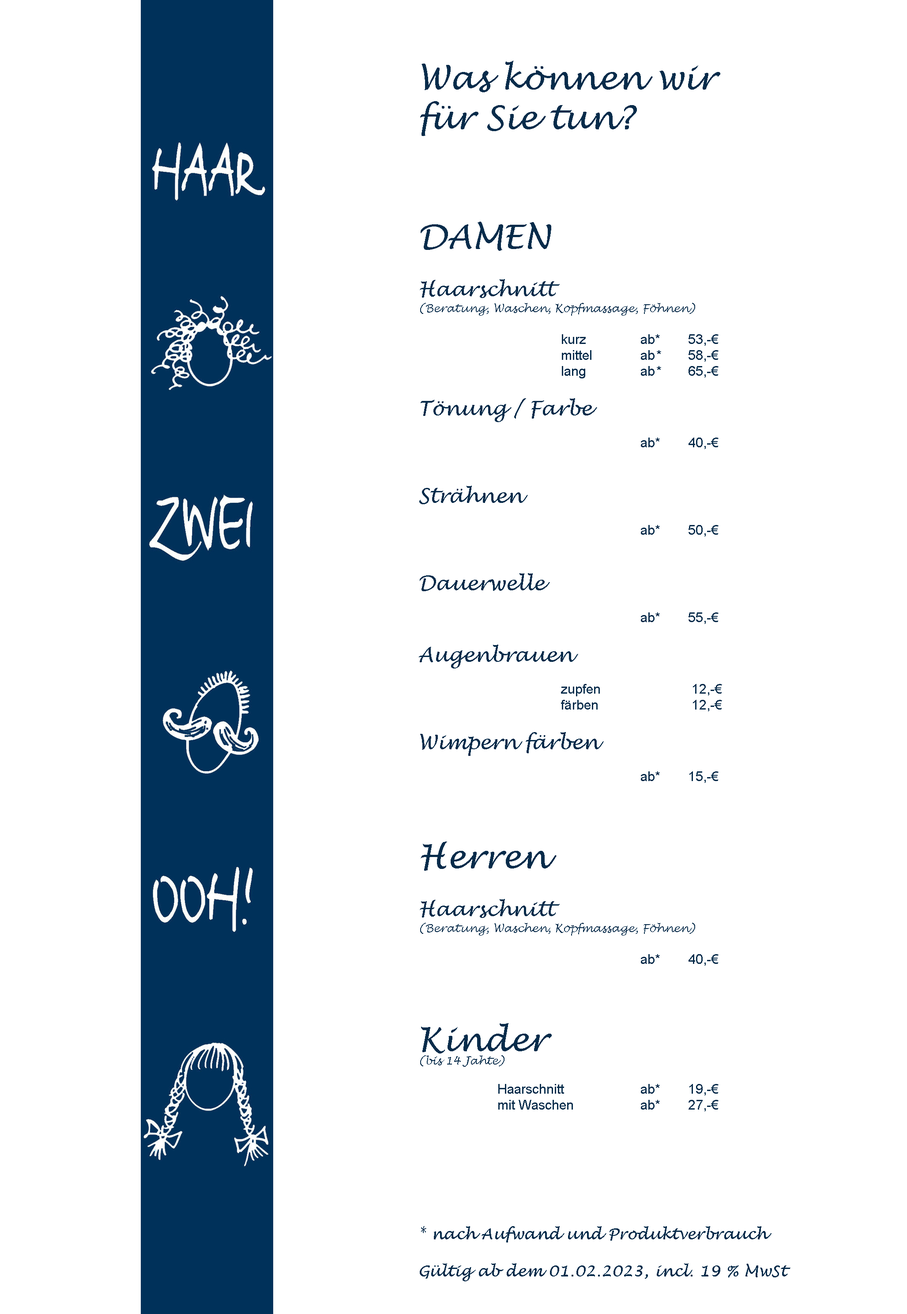
<style>
.page{position:relative;width:907px;height:1314px;background:#ffffff}
.page>*{position:absolute;margin:0}
.t1{font:13.2px "ArialMT";color:#072c4b}
.t2{font:33.1px "LucidaHandwriting-Italic";color:#072c4b}
.t3{font:19.9px "LucidaHandwriting-Italic";color:#072c4b}
.t4{font:11px "LucidaHandwriting-Italic";color:#072c4b}
.t5{font:15.5px "LucidaHandwriting-Italic";color:#072c4b}
</style>
<div class="page">
<p class="t1" style="left:419px;top:60px;width:372px;height:1221px"><span class="t2">Was können wir <br>für Sie tun?<br><br><br>DAMEN<br><br></span><span class="t3">Haarschnitt       <br></span><span class="t4">(Beratung, Waschen, Kopfmassage, Föhnen)</span>      <br><br>         kurz     ab*  53,-€<br>         mittel    ab *   58,-€ <br>         lang    ab *   65,-€ <br><br><span class="t3">Tönung / Farbe<br></span><br>              ab*   40,-€ <br><br><br><span class="t3">Strähnen<br></span><br>              ab*   50,-€ <br><br><br><span class="t3">Dauerwelle<br></span><br>               ab*   55,-€<br><br><span class="t3">Augenbrauen<br></span><br>         zupfen        12,-€<br>         färben         12,-€<br><br><span class="t3">Wimpern färben<br></span><br>              ab*   15,-€ <br><br><br><br><span class="t2">Herren<br><br></span><span class="t3">Haarschnitt       <br></span><span class="t4">(Beratung, Waschen, Kopfmassage, Föhnen)</span>      <br><br>              ab*   40,-€ <br><br><br><br><span class="t2">Kinder<br></span><span class="t4">(bis 14 Jahte)<br><br></span>     Haarschnitt     ab*  19,-€ <br>     mit Waschen     ab*  27,-€ <br><br><br><br><br><span class="t5">* nach Aufwand und Produktverbrauch <br><br>Gültig ab dem 01.02.2023, incl. 19 % MwSt</span></p>
</div>
